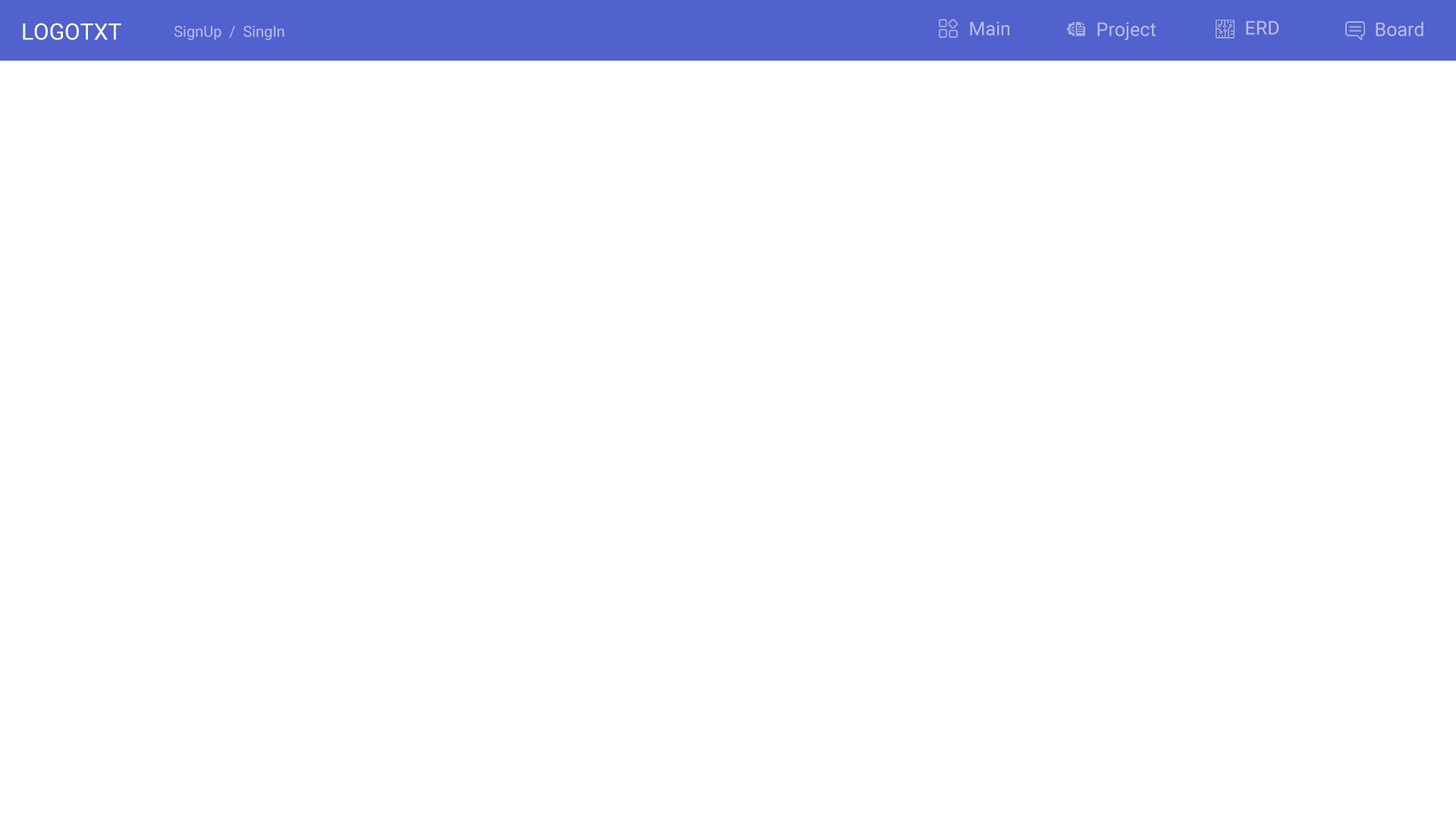
<style>
.page{position:relative;width:1456px;height:819px;background:#ffffff}
.page>*{position:absolute;margin:0}
.t1{font:22.7px "Roboto-Regular";color:#ffffff}
.t2{font:15.2px "Roboto-Regular";color:#b6bbe7}
.t3{font:19px "Roboto-Regular";color:#b6bbe7}
</style>
<div class="page">
<p class="t1" style="left:23px;top:23px;width:98px;height:17px">LOGOTXT</p>
<p class="t2" style="left:174px;top:26px;width:110px;height:14px">SignUp  /  SingIn</p>
<p class="t3" style="left:970px;top:21px;width:39px;height:15px">Main</p>
<p class="t3" style="left:1097px;top:22px;width:59px;height:18px">Project</p>
<p class="t3" style="left:1246px;top:20px;width:33px;height:15px">ERD</p>
<p class="t3" style="left:1376px;top:21px;width:47px;height:15px">Board</p>
</div>
